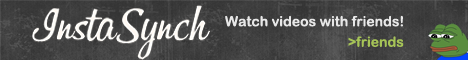
<style>
.page{position:relative;width:468px;height:60px}
.page>*{position:absolute;margin:0}
.t1{font:14px "ArialRoundedMTBold";color:#e8e8e8}
.t2{font:14px "ArialRoundedMTBold";color:#a6c457}
</style>
<div class="page">
<p class="t1" style="left:225px;top:15px;width:178px;height:12px">Watch videos with friends!</p>
<p class="t2" style="left:348px;top:36px;width:56px;height:11px">&gt;friends</p>
</div>
